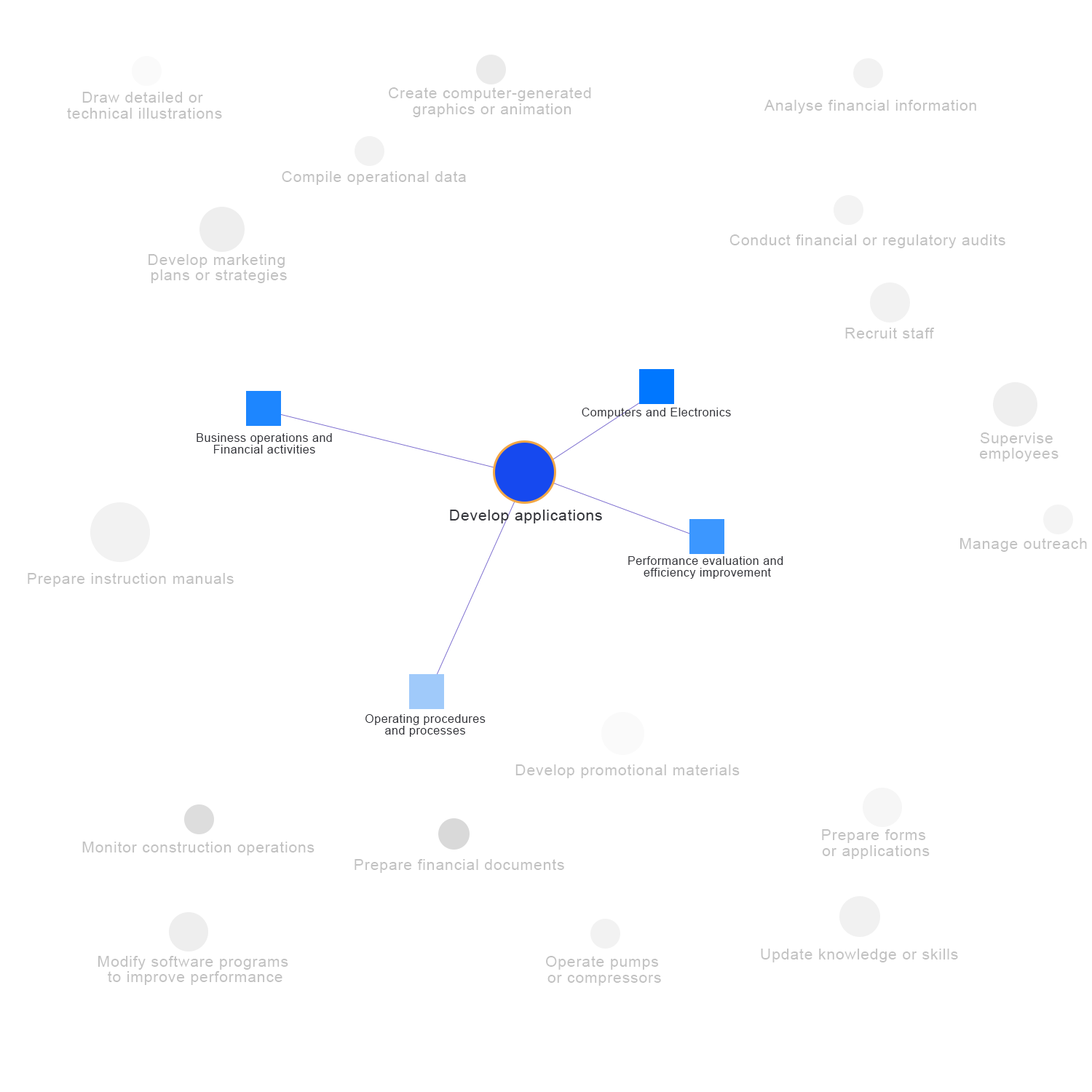
<style>
.page{position:relative;width:1092px;height:1092px;background:#ffffff}
.page>*{position:absolute;margin:0}
.t1{font:15.5px/15.5px "ArialMT";letter-spacing:0.035em;color:#c2c2c2}
.t2{font:15.5px "ArialMT";letter-spacing:0.035em;color:#c2c2c2}
.t3{font:11.6px "ArialMT";letter-spacing:0.035em;color:#33343a}
.t4{font:11.6px/11.6px "ArialMT";letter-spacing:0.035em;color:#33343a}
.t5{font:15.5px "ArialMT";letter-spacing:0.035em;color:#33343a}
</style>
<div class="page">
<p class="t1" style="left:389px;top:87px;width:202px;height:30px;text-align:center">Create computer-generated <br>graphics or animation</p>
<p class="t1" style="left:67px;top:92px;width:155px;height:27px;text-align:center">Draw detailed or <br>technical illustrations</p>
<p class="t2" style="left:764px;top:100px;width:212px;height:14px">Analyse financial information</p>
<p class="t2" style="left:282px;top:171px;width:184px;height:14px">Compile operational data</p>
<p class="t2" style="left:729px;top:234px;width:276px;height:14px">Conduct financial or regulatory audits</p>
<p class="t1" style="left:149px;top:254px;width:138px;height:29px;text-align:center">Develop marketing <br>plans or strategies</p>
<p class="t2" style="left:845px;top:328px;width:90px;height:11px">Recruit staff</p>
<p class="t3" style="left:582px;top:408px;width:149px;height:11px">Computers and Electronics</p>
<p class="t4" style="left:197px;top:433px;width:135px;height:21px;text-align:center">Business operations and <br>Financial activities</p>
<p class="t1" style="left:979px;top:432px;width:79px;height:30px;text-align:center">Supervise <br>employees</p>
<p class="t5" style="left:450px;top:510px;width:152px;height:13px">Develop applications</p>
<p class="t4" style="left:628px;top:556px;width:155px;height:23px;text-align:center">Performance evaluation and <br>efficiency improvement</p>
<p class="t2" style="left:28px;top:573px;width:206px;height:14px">Prepare instruction manuals</p>
<p class="t4" style="left:365px;top:714px;width:121px;height:23px;text-align:center">Operating procedures <br>and processes</p>
<p class="t2" style="left:515px;top:764px;width:225px;height:14px">Develop promotional materials</p>
<p class="t1" style="left:822px;top:829px;width:108px;height:30px;text-align:center">Prepare forms <br>or applications</p>
<p class="t2" style="left:82px;top:842px;width:232px;height:13px">Monitor construction operations</p>
<p class="t2" style="left:355px;top:859px;width:209px;height:14px">Prepare financial documents</p>
<p class="t2" style="left:761px;top:949px;width:197px;height:13px">Update knowledge or skills</p>
<p class="t1" style="left:98px;top:956px;width:190px;height:29px;text-align:center">Modify software programs <br>to improve performance</p>
<p class="t1" style="left:546px;top:956px;width:115px;height:30px;text-align:center">Operate pumps <br>or compressors</p>
</div>
